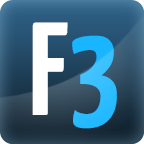
<style>
.page{position:relative;width:144px;height:144px}
.page>*{position:absolute;margin:0}
.t1{font:132px "YanoneKaffeesatz-Bold";color:#ffffff}
.t2{font:132px "YanoneKaffeesatz-Bold";color:#19b6ff}
</style>
<div class="page">
<p class="t1" style="left:32px;top:22px;width:85px;height:107px">F<span class="t2">3</span></p>
</div>
